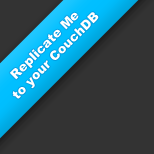
<style>
.page{position:relative;width:154px;height:154px;background:#333333}
.page>*{position:absolute;margin:0}
.t1{font:12.7px "Arial-Black";color:#ffffff}
</style>
<div class="page">
<p class="t1" style="left:9px;top:12px;width:90px;height:87px;text-align:center;rotate:-45deg">Replicate Me<br>to your CouchDB</p>
</div>
